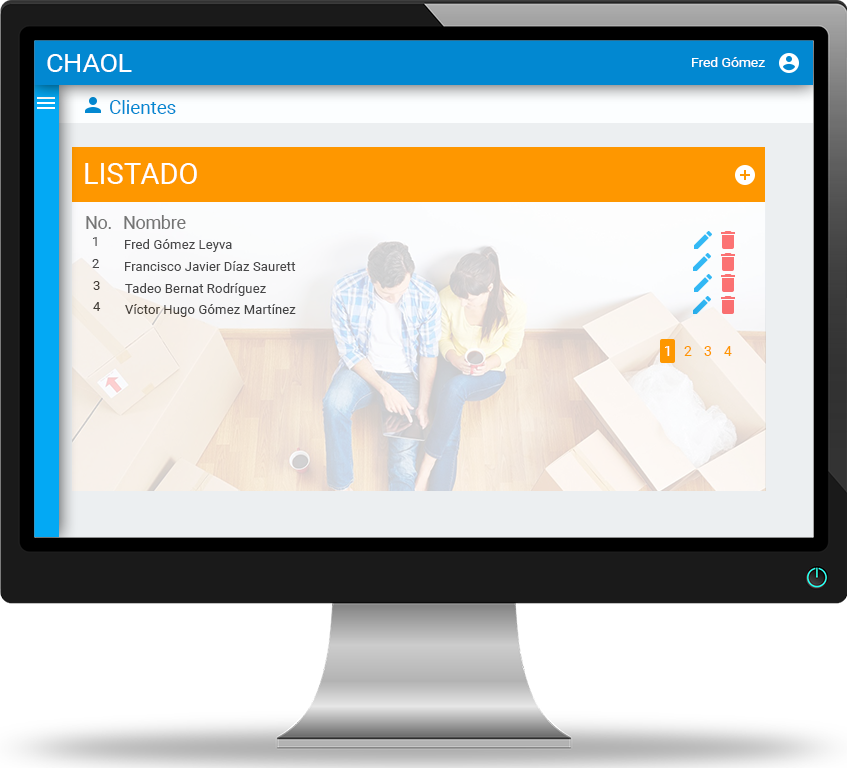
<style>
.page{position:relative;width:847px;height:768px}
.page>*{position:absolute;margin:0}
.t1{font:25.7px "Roboto-Regular";color:#ffffff}
.t2{font:13.3px "Roboto-Regular";color:#ffffff;scale:1.04 1}
.t3{font:18.6px "Roboto-Regular";color:#0288d1}
.t4{font:29.1px "Roboto-Regular";color:#ffffff}
.t5{font:17.8px "Roboto-Regular";color:#757575}
.t6{font:13.3px "Roboto-Regular";color:#484849}
.t7{font:13.3px "Roboto-Regular";color:#453f39}
.t8{font:13.3px "Roboto-Regular";color:#464647}
.t9{font:13.3px "Roboto-Regular";color:#45403a}
.t10{font:13.3px "Roboto-Regular";color:#454445}
.t11{font:14px "Roboto-Regular";color:#ffffff}
.t12{font:14px "Roboto-Regular";color:#fe9700}
</style>
<div class="page">
<p class="t1" style="left:47px;top:54px;width:85px;height:18px">CHAOL</p>
<p class="t2" style="left:692px;top:57px;width:73px;height:10px">Fred Gómez</p>
<p class="t3" style="left:110px;top:100px;width:66px;height:14px">Clientes</p>
<p class="t4" style="left:85px;top:163px;width:112px;height:21px">LISTADO</p>
<p class="t5" style="left:86px;top:216px;width:25px;height:13px">No.</p>
<p class="t5" style="left:124px;top:215px;width:62px;height:14px">Nombre</p>
<p class="t6" style="left:93px;top:237px;width:4px;height:9px">1</p>
<p class="t6" style="left:125px;top:239px;width:107px;height:13px">Fred Gómez Leyva</p>
<p class="t6" style="left:92px;top:259px;width:7px;height:9px">2</p>
<p class="t6" style="left:125px;top:261px;width:171px;height:10px">Francisco Javier Díaz Saurett</p>
<p class="t7" style="left:93px;top:281px;width:7px;height:9px">3</p>
<p class="t8" style="left:125px;top:283px;width:141px;height:13px">Tadeo Bernat Rodríguez</p>
<p class="t9" style="left:93px;top:302px;width:8px;height:9px">4</p>
<p class="t10" style="left:125px;top:304px;width:171px;height:13px">Víctor Hugo Gómez Martínez</p>
<p class="t11" style="left:665px;top:346px;width:5px;height:10px">1</p>
<p class="t12" style="left:684px;top:346px;width:8px;height:10px">2</p>
<p class="t12" style="left:704px;top:346px;width:8px;height:10px">3</p>
<p class="t12" style="left:724px;top:346px;width:8px;height:10px">4</p>
</div>
